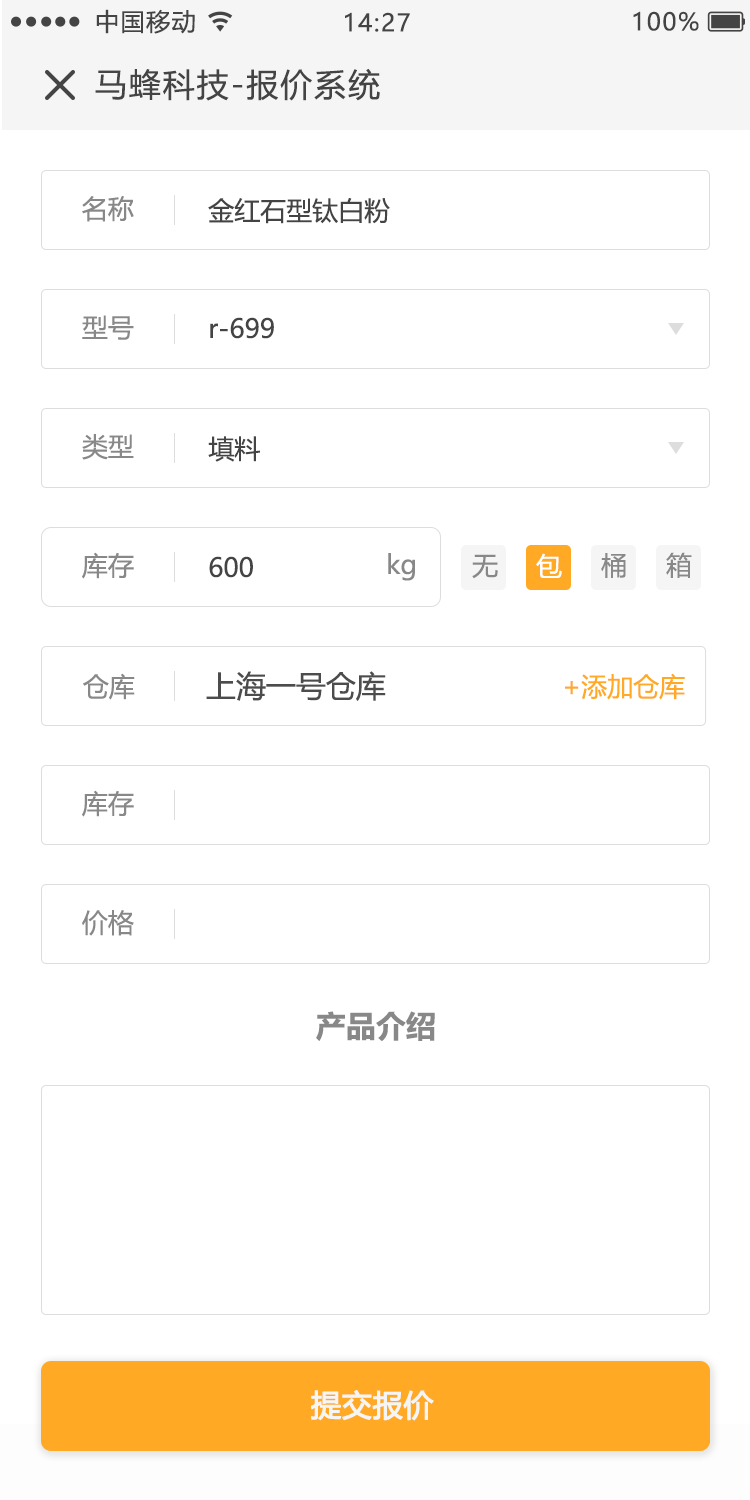
<style>
.page{position:relative;width:750px;height:1500px;background:#ffffff}
.page>*{position:absolute;margin:0}
.t1{font:24px "MicrosoftYaHeiUI";letter-spacing:0.06em;color:#444444}
.t2{font:32px "MicrosoftYaHeiUI";letter-spacing:0.06em;color:#444444}
.t3{font:26px "MicrosoftYaHeiUI";color:#888888}
.t4{font:26px "MicrosoftYaHeiUI";color:#444444}
.t5{font:26px "MicrosoftYaHeiUI";color:#ffffff}
.t6{font:30px "MicrosoftYaHeiUI";color:#4c4c4c}
.t7{font:26px "MicrosoftYaHeiUI";color:#ffa924}
.t8{font:30px "MicrosoftYaHeiUI-Bold";color:#888888}
.t9{font:30px "MicrosoftYaHeiUI";color:#f5f5f5;font-weight:bold}
</style>
<div class="page">
<p class="t1" style="left:96px;top:9px;width:99px;height:25px">中国移动</p>
<p class="t1" style="left:345px;top:12px;width:65px;height:20px">14:27</p>
<p class="t1" style="left:633px;top:11px;width:66px;height:20px">100%</p>
<p class="t2" style="left:95px;top:68px;width:285px;height:33px">马蜂科技-报价系统</p>
<p class="t3" style="left:82px;top:196px;width:52px;height:26px">名称</p>
<p class="t4" style="left:208px;top:198px;width:182px;height:26px">金红石型钛白粉</p>
<p class="t3" style="left:82px;top:315px;width:52px;height:25px">型号</p>
<p class="t4" style="left:210px;top:317px;width:64px;height:22px">r-699</p>
<p class="t3" style="left:82px;top:434px;width:52px;height:26px">类型</p>
<p class="t4" style="left:208px;top:436px;width:52px;height:26px">填料</p>
<p class="t3" style="left:82px;top:552px;width:52px;height:27px">库存</p>
<p class="t4" style="left:209px;top:556px;width:44px;height:22px">600</p>
<p class="t3" style="left:388px;top:553px;width:27px;height:28px">kg</p>
<p class="t3" style="left:472px;top:554px;width:26px;height:25px">无</p>
<p class="t5" style="left:536px;top:553px;width:26px;height:25px">包</p>
<p class="t3" style="left:601px;top:553px;width:25px;height:25px">桶</p>
<p class="t3" style="left:666px;top:552px;width:26px;height:26px">箱</p>
<p class="t3" style="left:83px;top:673px;width:52px;height:27px">仓库</p>
<p class="t6" style="left:206px;top:671px;width:180px;height:30px">上海一号仓库</p>
<p class="t7" style="left:565px;top:673px;width:120px;height:27px">+添加仓库</p>
<p class="t3" style="left:82px;top:790px;width:52px;height:27px">库存</p>
<p class="t3" style="left:82px;top:910px;width:52px;height:26px">价格</p>
<p class="t8" style="left:316px;top:1011px;width:119px;height:31px">产品介绍</p>
<p class="t9" style="left:311px;top:1390px;width:123px;height:31px">提交报价</p>
</div>
